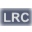
<style>
.page{position:relative;width:32px;height:32px;background:#ffffff}
.page>*{position:absolute;margin:0}
.t1{font:13px "Arial-BoldMT";color:#cfd0d4}
</style>
<div class="page">
<p class="t1" style="left:4px;top:12px;width:26px;height:11px">LRC</p>
</div>
